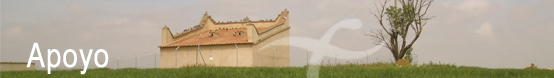
<style>
.page{position:relative;width:554px;height:78px}
.page>*{position:absolute;margin:0}
.t1{font:34px "ArialNarrow";color:#ffffff;font-weight:bold}
</style>
<div class="page">
<p class="t1" style="left:26px;top:42px;width:83px;height:33px">Apoyo</p>
</div>
